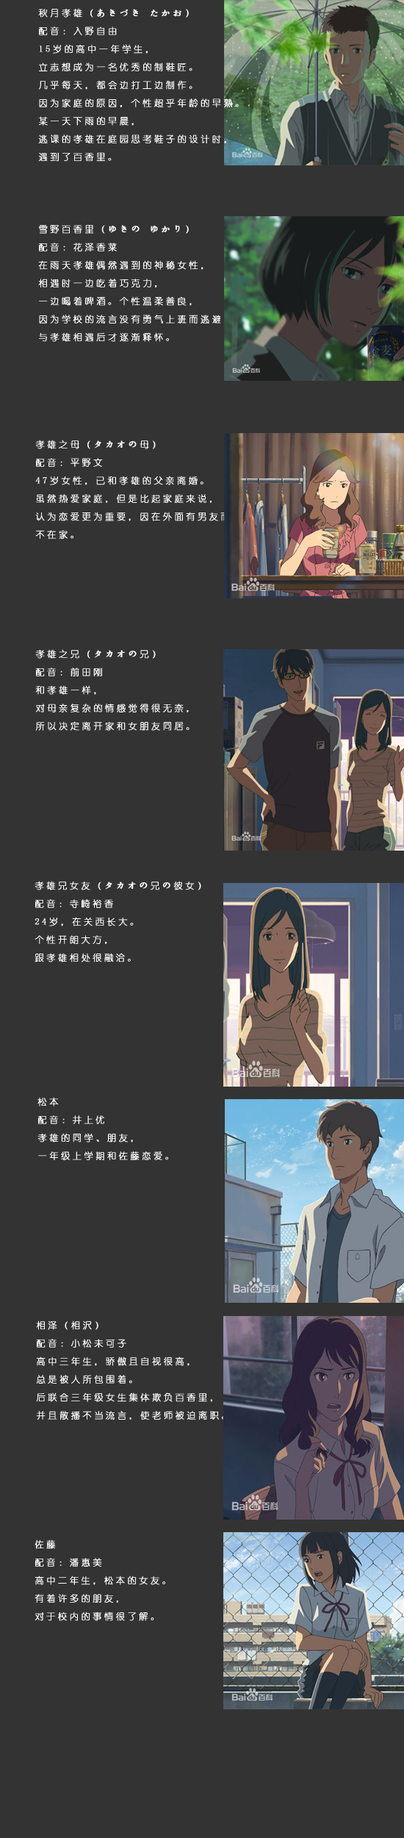
<style>
.page{position:relative;width:404px;height:1838px;background:#333333}
.page>*{position:absolute;margin:0}
.t1{font:9px/18px "YouYuan";letter-spacing:0.26em;color:#ffffff;font-weight:bold}
</style>
<div class="page">
<p class="t1" style="left:38px;top:8px;width:201px;height:154px">秋月孝雄（あきづき たかお）<br>配音：入野自由<br>15岁的高中一年学生，<br>立志想成为一名优秀的制鞋匠。<br>几乎每天，都会边打工边制作。<br>因为家庭的原因，个性超乎年龄的早熟。<br>某一天下雨的早晨，<br>逃课的孝雄在庭园思考鞋子的设计时，<br>遇到了百香里。</p>
<p class="t1" style="left:38px;top:225px;width:188px;height:117px">雪野百香里（ゆきの ゆかり）<br>配音：花泽香菜<br>在雨天孝雄偶然遇到的神秘女性，<br>相遇时一边吃着巧克力，<br>一边喝着啤酒。个性温柔善良，<br>因为学校的流言没有勇气上班而逃避，<br>与孝雄相遇后才逐渐释怀。</p>
<p class="t1" style="left:35px;top:440px;width:218px;height:99px">孝雄之母（タカオの母）<br>配音：平野文<br>47岁女性，已和孝雄的父亲离婚。<br>虽然热爱家庭，但是比起家庭来说，<br>认为恋爱更为重要，因在外面有男友而时常<br>不在家。</p>
<p class="t1" style="left:35px;top:649px;width:155px;height:82px">孝雄之兄（タカオの兄）<br>配音：前田刚<br>和孝雄一样，<br>对母亲复杂的情感觉得很无奈，<br>所以决定离开家和女朋友同居。</p>
<p class="t1" style="left:35px;top:881px;width:166px;height:81px">孝雄兄女友（タカオの兄の彼女）<br>配音：寺崎裕香<br>24岁，在关西长大。<br>个性开朗大方，<br>跟孝雄相处很融洽。</p>
<p class="t1" style="left:37px;top:1097px;width:131px;height:63px">松本<br>配音：井上优<br>孝雄的同学、朋友，<br>一年级上学期和佐藤恋爱。</p>
<p class="t1" style="left:36px;top:1321px;width:189px;height:99px">相泽（相沢）<br>配音：小松未可子<br>高中三年生，骄傲且自视很高，<br>总是被人所包围着。<br>后联合三年级女生集体欺负百香里，<br>并且散播不当流言，使老师被迫离职。</p>
<p class="t1" style="left:35px;top:1540px;width:130px;height:81px">佐藤<br>配音：潘惠美<br>高中二年生，松本的女友。<br>有着许多的朋友，<br>对于校内的事情很了解。</p>
</div>
